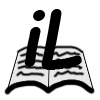
<style>
.page{position:relative;width:100px;height:100px;background:#ffffff}
.page>*{position:absolute;margin:0}
.t1{font:76px "ComicSansMS-BoldItalic";color:#000000}
</style>
<div class="page">
<p class="t1" style="left:24px;top:9px;width:58px;height:61px">iL</p>
</div>
